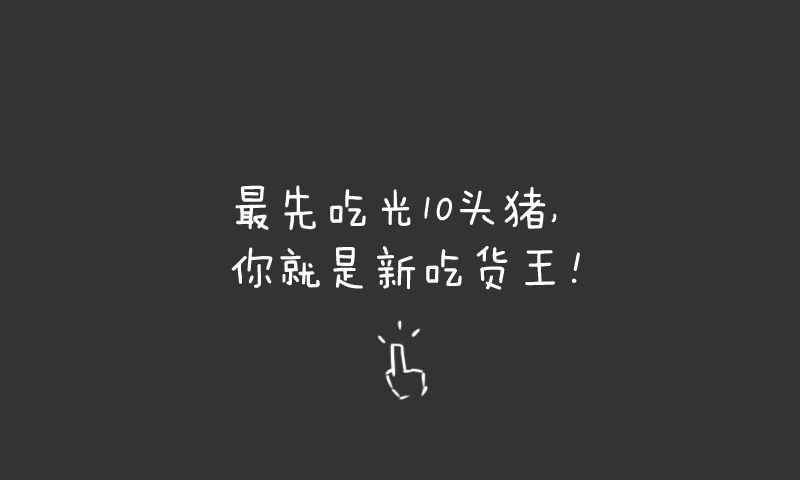
<style>
.page{position:relative;width:800px;height:480px;background:#333333}
.page>*{position:absolute;margin:0}
.t1{font:48px/60px "FZMWJW--GB1-0";color:#ffffff}
</style>
<div class="page">
<p class="t1" style="left:231px;top:185px;width:349px;height:105px">最先吃光10头猪，<br>你就是新吃货王！</p>
</div>
